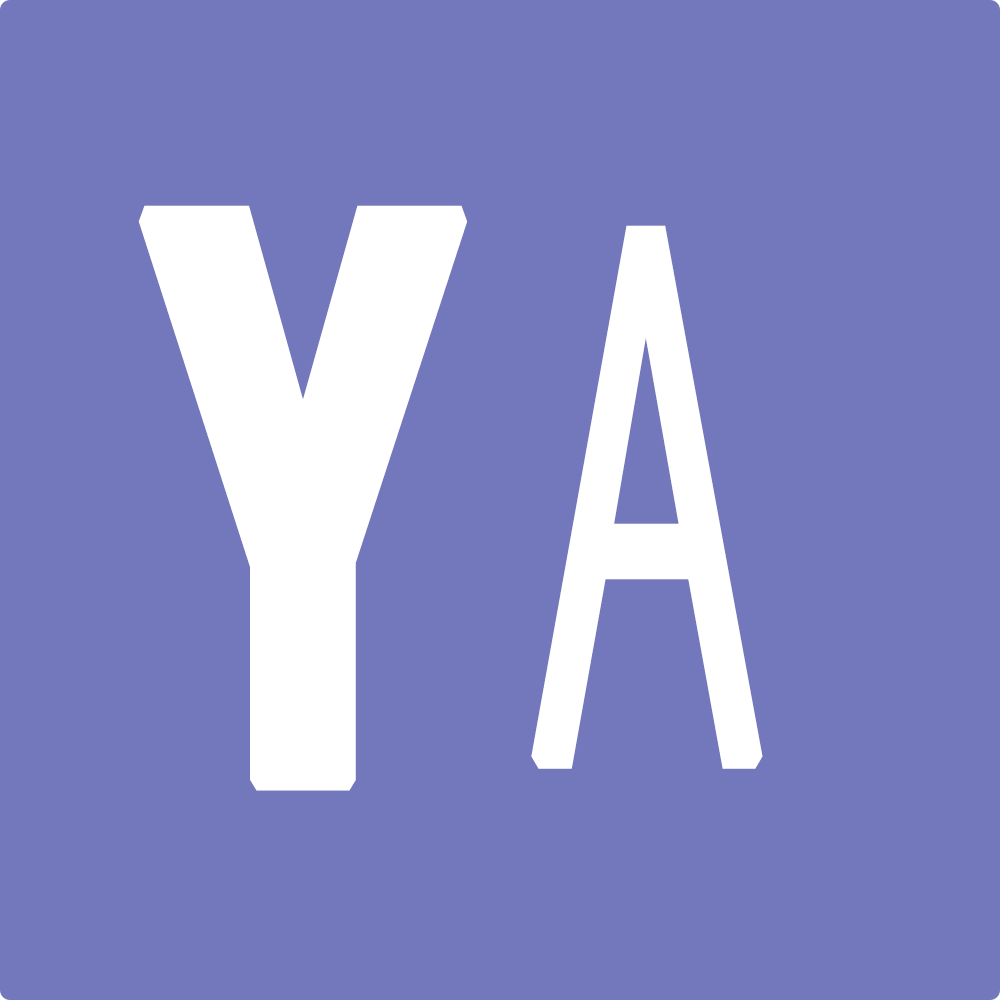
<style>
.page{position:relative;width:1000px;height:1000px;background:#7377bb}
.page>*{position:absolute;margin:0}
.t1{font:788.9px "OpenSans-Extrabold";color:#ffffff;font-weight:bold;scale:0.6 1}
.t2{font:732.4px "OpenSans-CondensedLight";color:#ffffff;font-weight:bold;scale:0.74 1}
</style>
<div class="page">
<p class="t1" style="left:138px;top:205px;width:329px;height:586px">Y</p>
<p class="t2" style="left:531px;top:225px;width:232px;height:544px">A</p>
</div>
